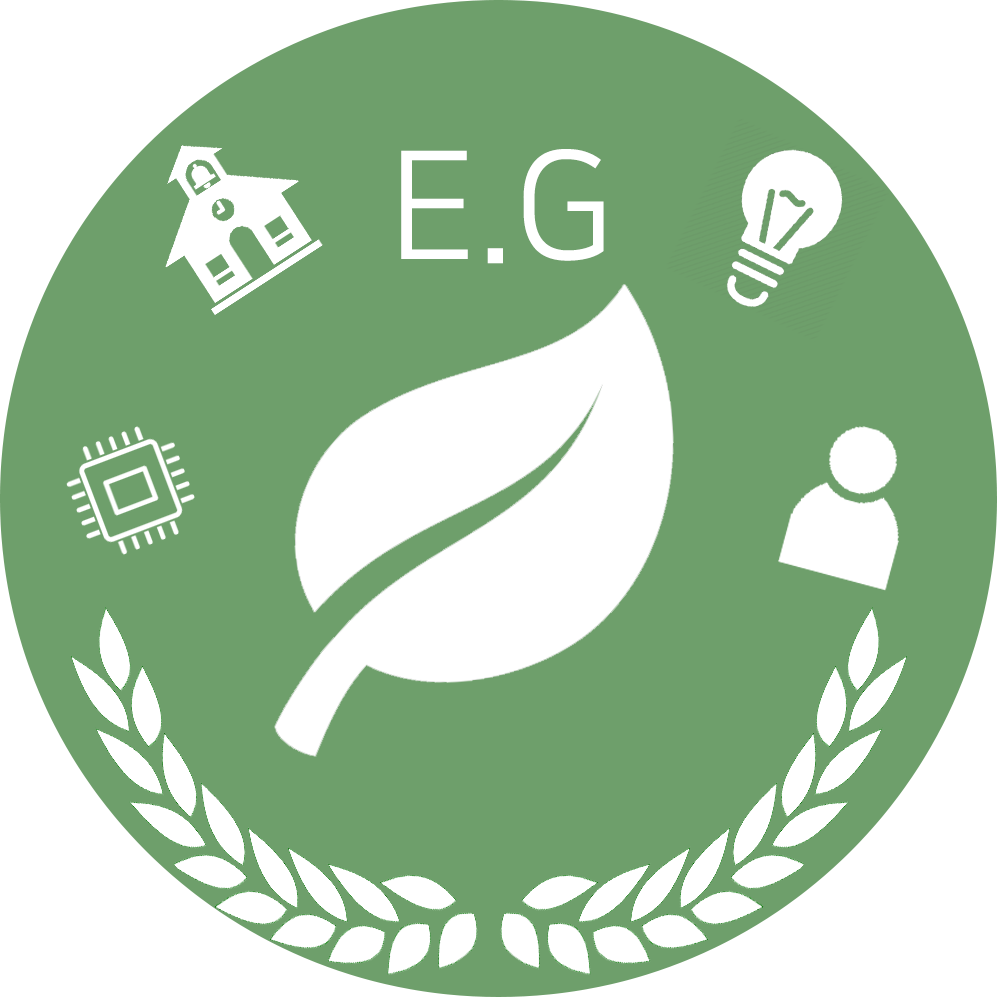
<style>
.page{position:relative;width:1000px;height:1000px;background:#6e9f6b}
.page>*{position:absolute;margin:0}
.t1{font:150px "NanumSquareR";color:#ffffff}
</style>
<div class="page">
<p class="t1" style="left:401px;top:149px;width:203px;height:115px">E.G</p>
</div>
